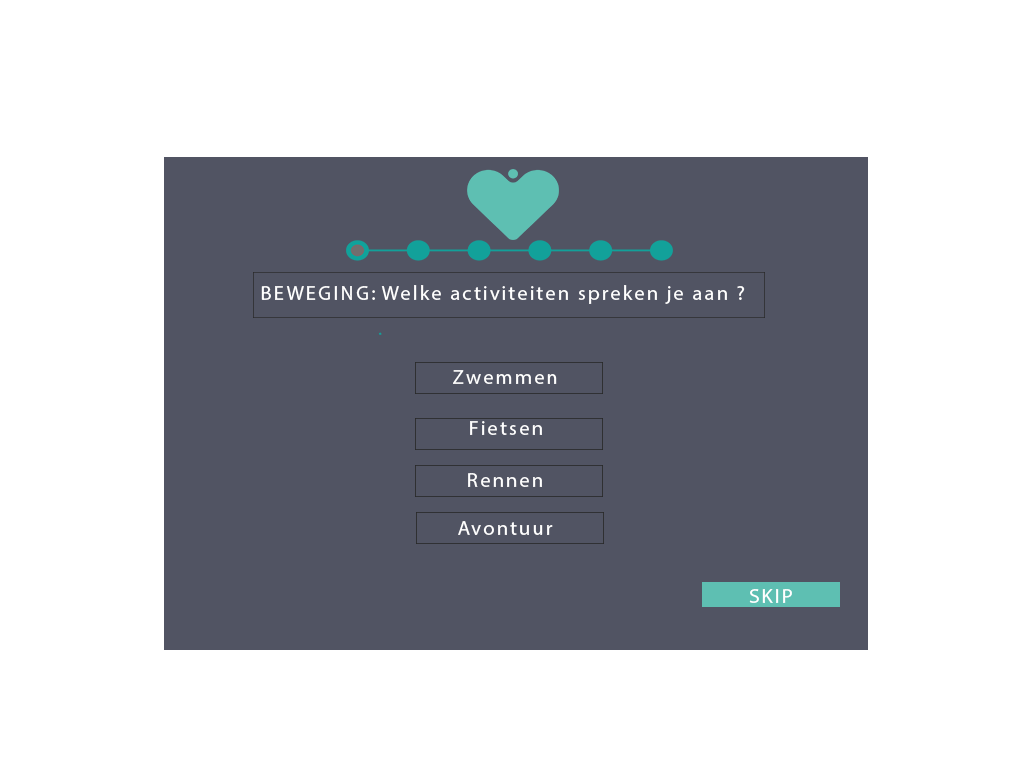
<style>
.page{position:relative;width:1024px;height:768px;background:#ffffff}
.page>*{position:absolute;margin:0}
.t1{font:20.6px "MyriadPro-Regular";letter-spacing:0.1em;color:#ffffff}
</style>
<div class="page">
<p class="t1" style="left:261px;top:286px;width:114px;height:14px">BEWEGING:</p>
<p class="t1" style="left:381px;top:285px;width:364px;height:19px">Welke activiteiten spreken je aan ?</p>
<p class="t1" style="left:453px;top:370px;width:104px;height:14px">Zwemmen</p>
<p class="t1" style="left:470px;top:421px;width:72px;height:14px">Fietsen</p>
<p class="t1" style="left:468px;top:473px;width:74px;height:14px">Rennen</p>
<p class="t1" style="left:458px;top:521px;width:95px;height:14px">Avontuur</p>
<p class="t1" style="left:749px;top:589px;width:43px;height:14px">SKIP</p>
</div>
